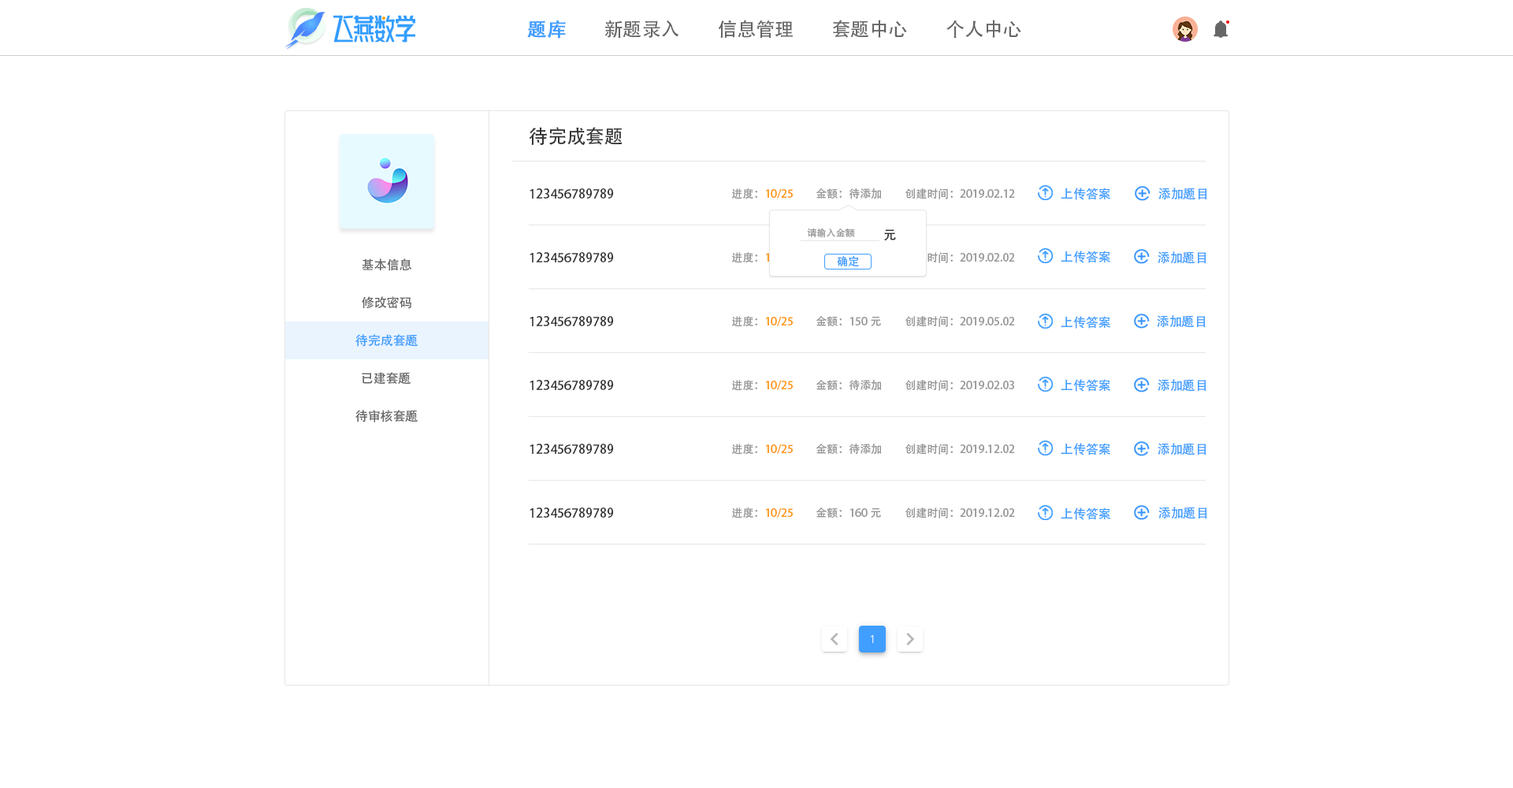
<style>
.page{position:relative;width:1513px;height:788px;background:#ffffff}
.page>*{position:absolute;margin:0}
.t1{font:18.9px "AdobeHeitiStd-Regular";color:#409eff;font-weight:bold}
.t2{font:18.9px "AdobeHeitiStd-Regular";color:#666666}
.t3{font:18.9px "AdobeHeitiStd-Regular";color:#333333}
.t4{font:12.6px "AdobeHeitiStd-Regular";color:#333333}
.t5{font:11px "AdobeHeitiStd-Regular";color:#ff9814}
.t6{font:11px "AdobeHeitiStd-Regular";color:#999999}
.t7{font:12.6px "AdobeHeitiStd-Regular";color:#409eff}
.t8{font:9.5px "AdobeHeitiStd-Regular";color:#999999}
.t9{font:11px "AdobeHeitiStd-Regular";color:#409eff}
.t10{font:12.6px "AdobeHeitiStd-Regular";color:#666666}
</style>
<div class="page">
<p class="t1" style="left:527px;top:20px;width:39px;height:19px">题库</p>
<p class="t2" style="left:604px;top:20px;width:75px;height:18px">新题录入</p>
<p class="t2" style="left:718px;top:20px;width:75px;height:19px">信息管理</p>
<p class="t2" style="left:833px;top:20px;width:74px;height:18px">套题中心</p>
<p class="t2" style="left:946px;top:20px;width:75px;height:18px">个人中心</p>
<p class="t3" style="left:529px;top:127px;width:94px;height:18px">待完成套题</p>
<p class="t4" style="left:530px;top:188px;width:84px;height:11px">123456789789</p>
<p class="t5" style="left:732px;top:188px;width:61px;height:11px"><span class="t6">进度：</span>10/25</p>
<p class="t6" style="left:816px;top:188px;width:66px;height:11px">金额：待添加</p>
<p class="t6" style="left:905px;top:188px;width:110px;height:11px">创建时间：2019.02.12</p>
<p class="t7" style="left:1061px;top:188px;width:49px;height:12px">上传答案</p>
<p class="t7" style="left:1158px;top:188px;width:49px;height:12px">添加题目</p>
<p class="t8" style="left:807px;top:228px;width:48px;height:10px">请输入金额</p>
<p class="t4" style="left:884px;top:229px;width:12px;height:12px">元</p>
<p class="t4" style="left:530px;top:252px;width:84px;height:10px">123456789789</p>
<p class="t5" style="left:732px;top:252px;width:61px;height:11px"><span class="t6">进度：</span>10/25</p>
<p class="t9" style="left:837px;top:255px;width:22px;height:12px">确定</p>
<p class="t6" style="left:905px;top:252px;width:110px;height:11px">创建时间：2019.02.02</p>
<p class="t7" style="left:1061px;top:251px;width:49px;height:12px">上传答案</p>
<p class="t7" style="left:1158px;top:251px;width:49px;height:13px">添加题目</p>
<p class="t10" style="left:362px;top:258px;width:50px;height:13px">基本信息</p>
<p class="t10" style="left:362px;top:296px;width:49px;height:13px">修改密码</p>
<p class="t4" style="left:530px;top:316px;width:84px;height:10px">123456789789</p>
<p class="t5" style="left:732px;top:316px;width:61px;height:11px"><span class="t6">进度：</span>10/25</p>
<p class="t6" style="left:816px;top:316px;width:65px;height:10px">金额：150元</p>
<p class="t6" style="left:905px;top:316px;width:110px;height:11px">创建时间：2019.05.02</p>
<p class="t7" style="left:1061px;top:316px;width:49px;height:13px">上传答案</p>
<p class="t7" style="left:1157px;top:315px;width:49px;height:13px">添加题目</p>
<p class="t7" style="left:355px;top:334px;width:63px;height:13px">待完成套题</p>
<p class="t10" style="left:362px;top:372px;width:49px;height:13px">已建套题</p>
<p class="t4" style="left:530px;top:380px;width:84px;height:10px">123456789789</p>
<p class="t5" style="left:732px;top:380px;width:61px;height:11px"><span class="t6">进度：</span>10/25</p>
<p class="t6" style="left:816px;top:380px;width:66px;height:10px">金额：待添加</p>
<p class="t6" style="left:905px;top:380px;width:109px;height:11px">创建时间：2019.02.03</p>
<p class="t7" style="left:1061px;top:379px;width:49px;height:13px">上传答案</p>
<p class="t7" style="left:1158px;top:379px;width:49px;height:13px">添加题目</p>
<p class="t10" style="left:355px;top:410px;width:63px;height:12px">待审核套题</p>
<p class="t4" style="left:530px;top:444px;width:84px;height:10px">123456789789</p>
<p class="t5" style="left:732px;top:444px;width:61px;height:11px"><span class="t6">进度：</span>10/25</p>
<p class="t6" style="left:816px;top:444px;width:66px;height:10px">金额：待添加</p>
<p class="t6" style="left:905px;top:444px;width:110px;height:11px">创建时间：2019.12.02</p>
<p class="t7" style="left:1061px;top:443px;width:49px;height:13px">上传答案</p>
<p class="t7" style="left:1158px;top:443px;width:49px;height:13px">添加题目</p>
<p class="t4" style="left:530px;top:508px;width:84px;height:10px">123456789789</p>
<p class="t5" style="left:732px;top:508px;width:61px;height:11px"><span class="t6">进度：</span>10/25</p>
<p class="t6" style="left:816px;top:508px;width:65px;height:10px">金额：160元</p>
<p class="t6" style="left:905px;top:508px;width:110px;height:11px">创建时间：2019.12.02</p>
<p class="t7" style="left:1061px;top:508px;width:49px;height:12px">上传答案</p>
<p class="t7" style="left:1158px;top:507px;width:49px;height:12px">添加题目</p>
</div>
